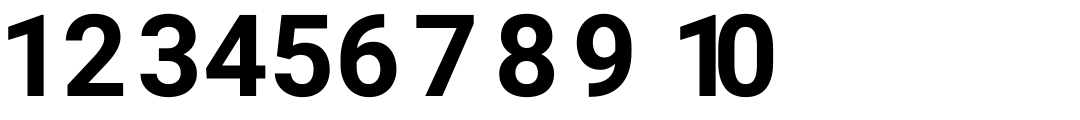
<style>
.page{position:relative;width:1080px;height:120px;background:#ffffff}
.page>*{position:absolute;margin:0}
.t1{font:114px "Roboto-Bold";color:#000000}
</style>
<div class="page">
<p class="t1" style="left:8px;top:14px;width:36px;height:82px">1</p>
<p class="t1" style="left:65px;top:13px;width:59px;height:83px">2</p>
<p class="t1" style="left:140px;top:13px;width:57px;height:85px">3</p>
<p class="t1" style="left:206px;top:14px;width:60px;height:82px">4</p>
<p class="t1" style="left:274px;top:14px;width:56px;height:84px">5</p>
<p class="t1" style="left:340px;top:14px;width:57px;height:84px">6</p>
<p class="t1" style="left:416px;top:14px;width:58px;height:82px">7</p>
<p class="t1" style="left:499px;top:13px;width:56px;height:85px">8</p>
<p class="t1" style="left:576px;top:13px;width:56px;height:84px">9</p>
<p class="t1" style="left:680px;top:14px;width:36px;height:82px">1</p>
<p class="t1" style="left:718px;top:13px;width:56px;height:85px">0</p>
</div>
